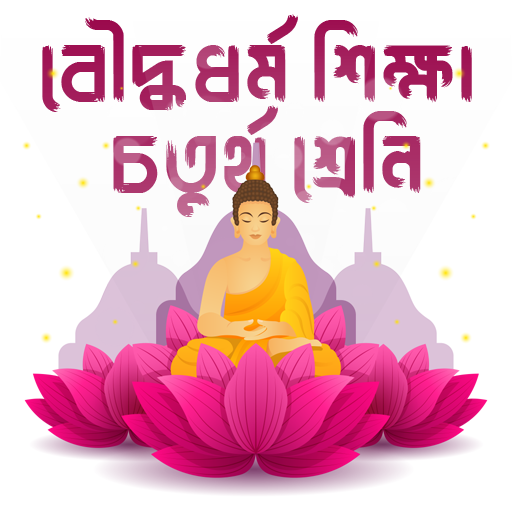
<style>
.page{position:relative;width:512px;height:512px;background:#ffffff}
.page>*{position:absolute;margin:0}
.t1{font:90.7px/90.4px "LiBhasa52Unicode"}
</style>
<div class="page">
<p class="t1" style="left:42px;top:14px;width:430px;height:203px;text-align:center">বৌদ্ধধর্ম শিক্ষা <br>চতুর্থ শ্রেনি</p>
</div>
